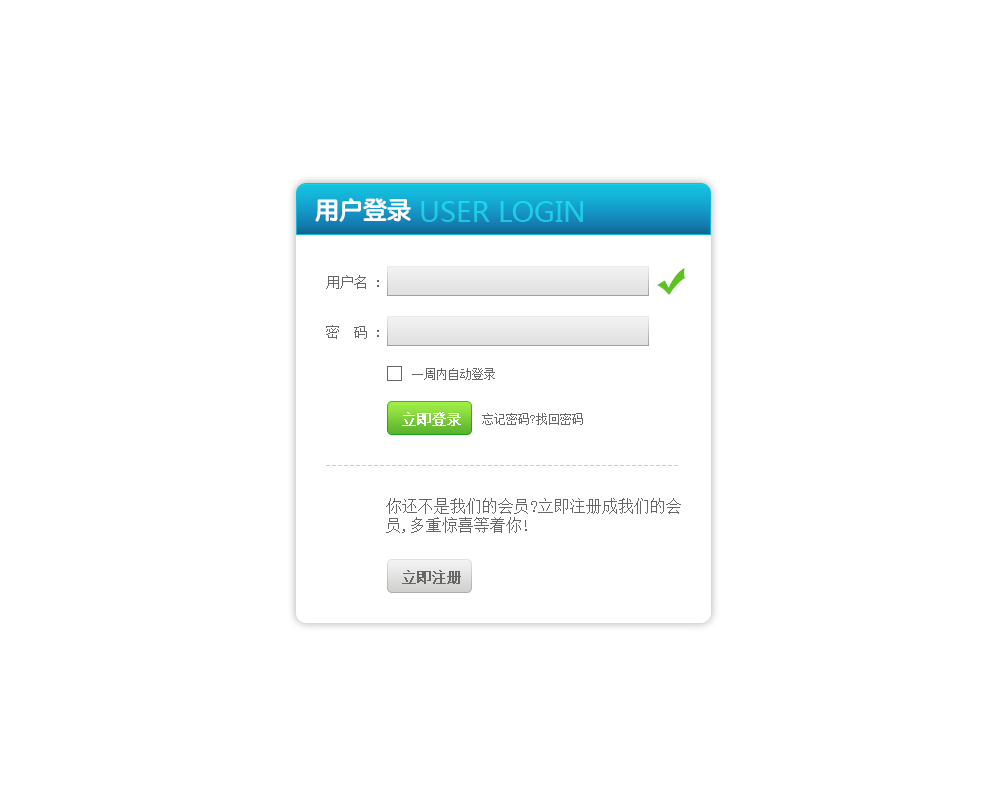
<style>
.page{position:relative;width:1000px;height:800px;background:#ffffff}
.page>*{position:absolute;margin:0}
.t1{font:24px "STYuanti-SC-Bold";color:#ffffff}
.t2{font:28px "MicrosoftYaHei";color:#1fcfe4}
.t3{font:14px "SimSun";color:#666666}
.t4{font:12px "SimSun";color:#666666}
.t5{font:14px "SimSun";color:#ffffff;font-weight:bold}
.t6{font:16px "SimSun";color:#666666}
.t7{font:14px "SimSun";color:#666666;font-weight:bold}
</style>
<div class="page">
<p class="t1" style="left:315px;top:198px;width:96px;height:24px">用户登录</p>
<p class="t2" style="left:421px;top:201px;width:162px;height:21px">USER LOGIN</p>
<p class="t3" style="left:326px;top:275px;width:53px;height:14px">用户名 :</p>
<p class="t3" style="left:326px;top:325px;width:53px;height:14px">密  码 :</p>
<p class="t4" style="left:412px;top:368px;width:83px;height:12px">一周内自动登录</p>
<p class="t5" style="left:402px;top:412px;width:59px;height:14px">立即登录</p>
<p class="t4" style="left:482px;top:413px;width:53px;height:12px">忘记密码?</p>
<p class="t4" style="left:536px;top:413px;width:47px;height:12px">找回密码</p>
<p class="t6" style="left:386px;top:498px;width:295px;height:35px">你还不是我们的会员?立即注册成我们的会<br>员,多重惊喜等着你!</p>
<p class="t7" style="left:402px;top:570px;width:59px;height:14px">立即注册</p>
</div>
